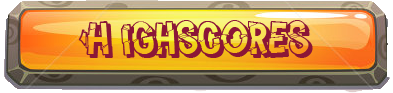
<style>
.page{position:relative;width:393px;height:93px}
.page>*{position:absolute;margin:0}
.t1{font:50px "PeintureFraiche";color:#8b1637}
</style>
<div class="page">
<p class="t1" style="left:78px;top:20px;width:235px;height:38px">Highscores</p>
</div>
